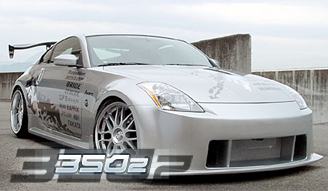
<style>
.page{position:relative;width:328px;height:191px}
.page>*{position:absolute;margin:0}
.t1{font:30px "DominatorMediumItalic"}
.t2{font:24px "DominatorMediumItalic"}
</style>
<div class="page">
<p class="t1" style="left:55px;top:155px;width:94px;height:18px">350<span class="t2">z</span></p>
</div>
